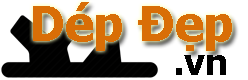
<style>
.page{position:relative;width:248px;height:80px;background:#ffffff}
.page>*{position:absolute;margin:0}
.t1{font:48px "Tahoma-Bold";color:#d96e06}
.t2{font:36px "Tahoma-Bold";color:#000000}
</style>
<div class="page">
<p class="t1" style="left:33px;top:2px;width:199px;height:49px">Dép Đẹp</p>
<p class="t2" style="left:176px;top:55px;width:50px;height:20px">.vn</p>
</div>
